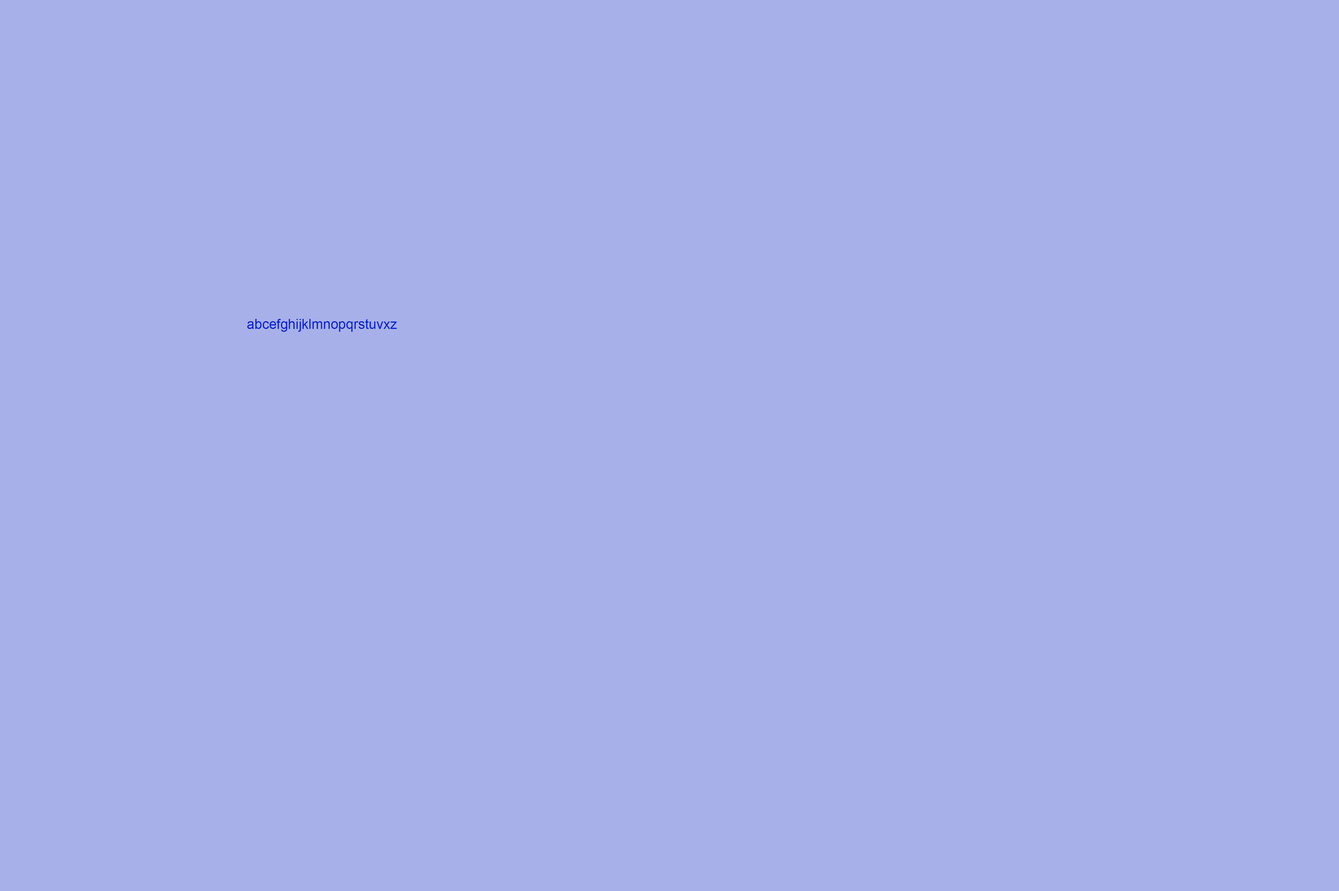
<style>
.page{position:relative;width:1339px;height:891px;background:#a7b0e9}
.page>*{position:absolute;margin:0}
.t1{font:13.7px "ArialMT";color:#0420d1}
</style>
<div class="page">
<p class="t1" style="left:247px;top:319px;width:150px;height:13px">abcefghijklmnopqrstuvxz</p>
</div>
